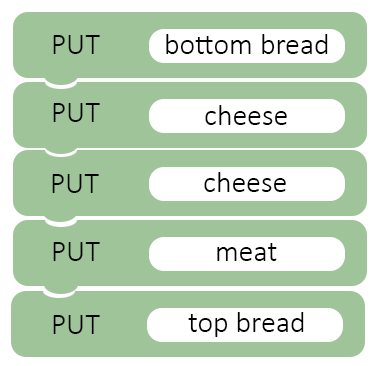
<style>
.page{position:relative;width:376px;height:366px;background:#a0c49a}
.page>*{position:absolute;margin:0}
.t1{font:30px "Calibri-Light";color:#000000}
</style>
<div class="page">
<p class="t1" style="left:53px;top:35px;width:47px;height:19px">PUT</p>
<p class="t1" style="left:166px;top:34px;width:162px;height:20px">bottom bread</p>
<p class="t1" style="left:53px;top:103px;width:47px;height:19px">PUT</p>
<p class="t1" style="left:205px;top:105px;width:82px;height:20px">cheese</p>
<p class="t1" style="left:52px;top:174px;width:47px;height:19px">PUT</p>
<p class="t1" style="left:204px;top:172px;width:82px;height:20px">cheese</p>
<p class="t1" style="left:53px;top:242px;width:47px;height:19px">PUT</p>
<p class="t1" style="left:217px;top:243px;width:60px;height:18px">meat</p>
<p class="t1" style="left:53px;top:315px;width:47px;height:19px">PUT</p>
<p class="t1" style="left:188px;top:312px;width:116px;height:25px">top bread</p>
</div>
